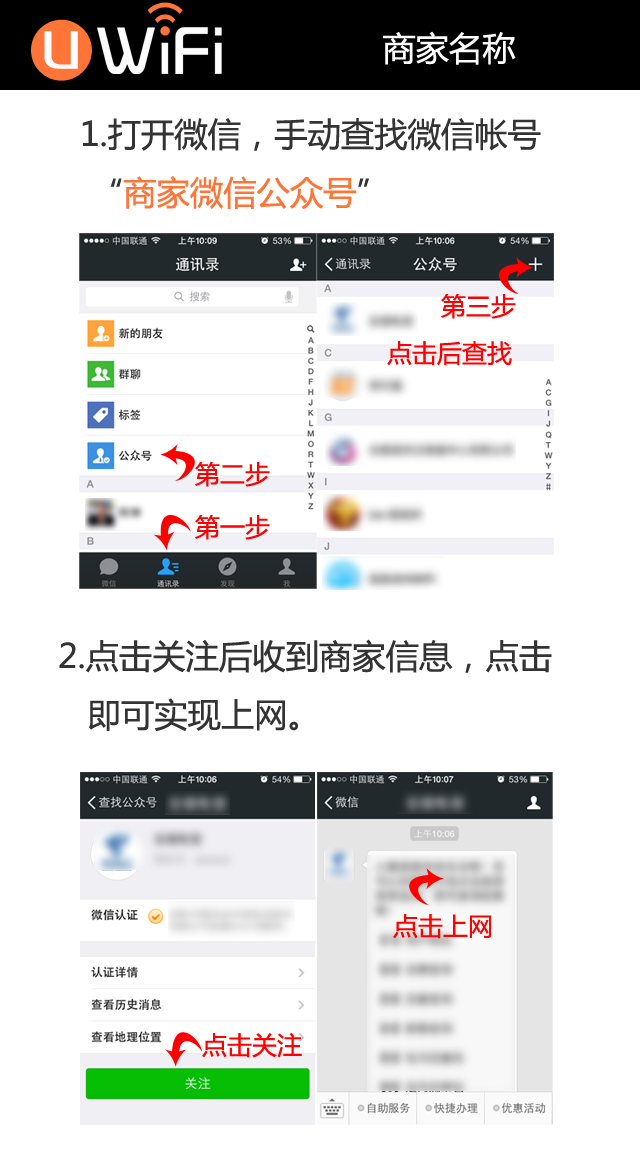
<style>
.page{position:relative;width:640px;height:1160px;background:#ffffff}
.page>*{position:absolute;margin:0}
.t1{font:62.5px "FZZZHUNHJW--GB1-0";letter-spacing:0.05em;color:#ffffff}
.t2{font:33.3px "MicrosoftYaHei";color:#ffffff}
.t3{font:33.3px "MicrosoftYaHei";color:#333333}
.t4{font:33.3px "MicrosoftYaHei";color:#ff7437}
.t5{font:25px "MicrosoftYaHei";color:#ff0000}
</style>
<div class="page">
<p class="t1" style="left:44px;top:31px;width:34px;height:38px">u</p>
<p class="t2" style="left:383px;top:31px;width:133px;height:34px">商家名称</p>
<p class="t3" style="left:82px;top:118px;width:459px;height:91px">1.打开微信，手动查找微信帐号<br> “<span class="t4">商家微信公众号</span>”</p>
<p class="t5" style="left:441px;top:294px;width:75px;height:25px">第三步</p>
<p class="t5" style="left:387px;top:341px;width:125px;height:25px">点击后查找</p>
<p class="t5" style="left:195px;top:462px;width:75px;height:25px">第二步</p>
<p class="t5" style="left:195px;top:515px;width:75px;height:25px">第一步</p>
<p class="t3" style="left:59px;top:639px;width:493px;height:92px">2.点击关注后收到商家信息，点击<br>   即可实现上网。</p>
<p class="t5" style="left:393px;top:914px;width:98px;height:25px">点击上网</p>
<p class="t5" style="left:202px;top:1033px;width:100px;height:25px">点击关注</p>
</div>
